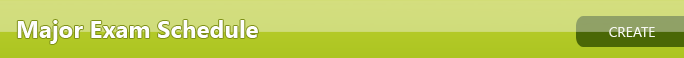
<style>
.page{position:relative;width:684px;height:58px}
.page>*{position:absolute;margin:0}
.t1{font:24px "SegoeUI-Bold";color:#fefefe}
.t2{font:14px "SegoeUI";color:#f6f7f1}
</style>
<div class="page">
<p class="t1" style="left:17px;top:20px;width:241px;height:24px">Major Exam Schedule</p>
<p class="t2" style="left:609px;top:27px;width:46px;height:10px">CREATE</p>
</div>
